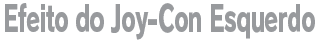
<style>
.page{position:relative;width:320px;height:40px;background:#ffffff}
.page>*{position:absolute;margin:0}
.t1{font:36px "RodinPro-EB";letter-spacing:-0.04em;color:#989a9d;scale:0.63 1}
</style>
<div class="page">
<p class="t1" style="left:5px;top:3px;width:310px;height:37px">Efeito do Joy-Con Esquerdo</p>
</div>
